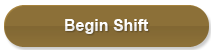
<style>
.page{position:relative;width:211px;height:50px;background:#8c7038}
.page>*{position:absolute;margin:0}
.t1{font:16px "Arial-BoldMT";color:#ffffff}
</style>
<div class="page">
<p class="t1" style="left:65px;top:19px;width:84px;height:15px">Begin Shift</p>
</div>
